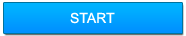
<style>
.page{position:relative;width:186px;height:36px}
.page>*{position:absolute;margin:0}
.t1{font:14px "ArialMT";color:#ffffff}
</style>
<div class="page">
<p class="t1" style="left:70px;top:12px;width:45px;height:12px">START</p>
</div>
